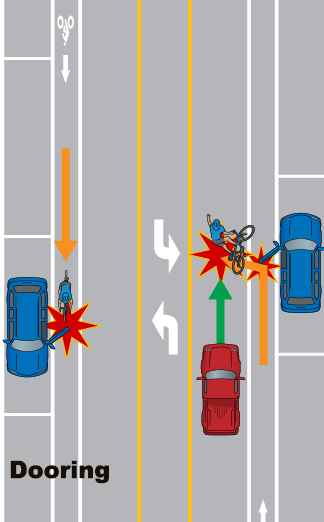
<style>
.page{position:relative;width:324px;height:522px;background:#b4b6b9}
.page>*{position:absolute;margin:0}
.t1{font:24px "Arial-Black";color:#170e05}
</style>
<div class="page">
<p class="t1" style="left:10px;top:460px;width:99px;height:24px">Dooring</p>
</div>
